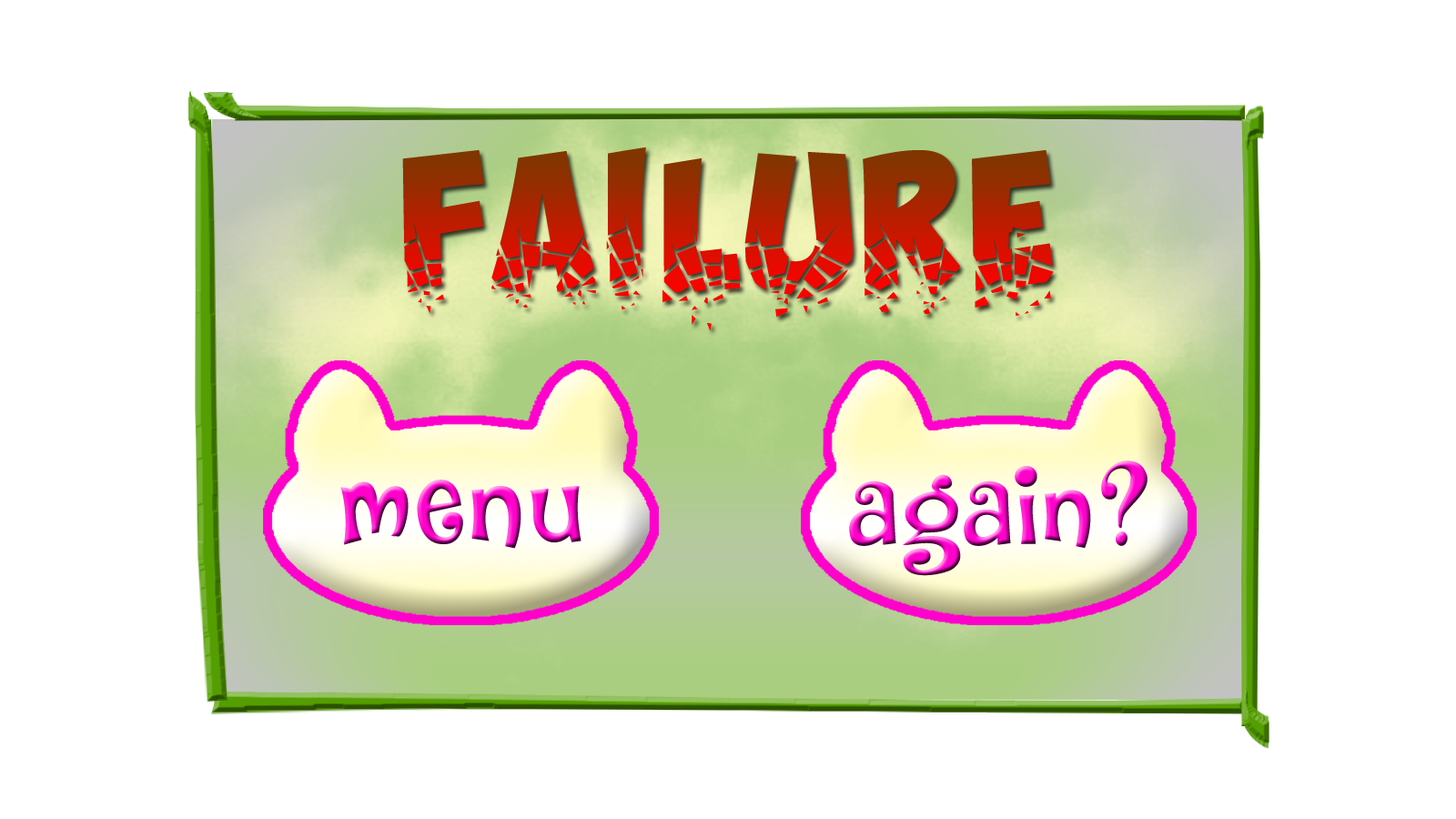
<style>
.page{position:relative;width:1456px;height:819px;background:#ffffff}
.page>*{position:absolute;margin:0}
.t1{font:136.5px "ObelixProBroken";letter-spacing:0.05em}
.t2{font:102.1px "DKJambo";letter-spacing:0.05em}
.t3{font:109.7px "DKJambo";letter-spacing:0.05em}
</style>
<div class="page">
<p class="t1" style="left:402px;top:147px;width:652px;height:183px">failure</p>
<p class="t2" style="left:849px;top:460px;width:298px;height:116px">again?</p>
<p class="t3" style="left:340px;top:480px;width:241px;height:69px">menu</p>
</div>
